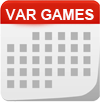
<style>
.page{position:relative;width:100px;height:102px}
.page>*{position:absolute;margin:0}
.t1{font:14.6px "Arial-BoldMT";color:#fbfbfd}
</style>
<div class="page">
<p class="t1" style="left:5px;top:9px;width:89px;height:11px">VAR GAMES</p>
</div>
